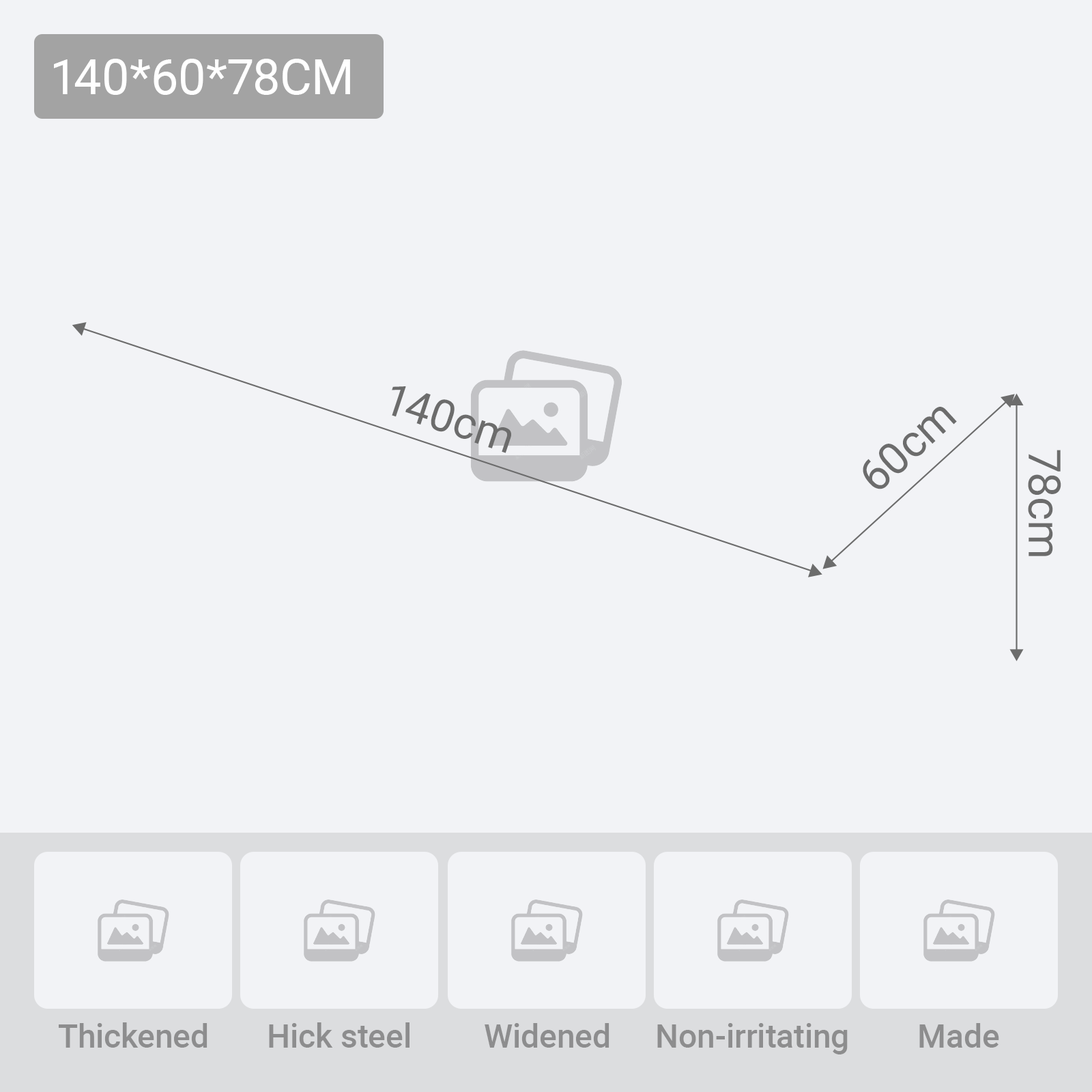
<style>
.page{position:relative;width:1092px;height:1092px;background:#f2f3f6}
.page>*{position:absolute;margin:0}
.t1{font:49.1px "Roboto-Regular";color:#ffffff}
.t2{font:44.5px "Roboto-Regular";color:#6c6c6c}
.t3{font:32.8px "Roboto-Medium";color:#8d8d8e}
</style>
<div class="page">
<p class="t1" style="left:54px;top:59px;width:296px;height:36px">140*60*78CM</p>
<p class="t2" style="left:392px;top:386px;width:119px;height:67px;rotate:18deg">140cm</p>
<p class="t2" style="left:863px;top:407px;width:94px;height:82px;rotate:-42deg">60cm</p>
<p class="t2" style="left:1028px;top:450px;width:33px;height:106px;rotate:90deg">78cm</p>
<p class="t3" style="left:59px;top:1022px;width:148px;height:26px">Thickened</p>
<p class="t3" style="left:269px;top:1022px;width:140px;height:26px">Hick steel</p>
<p class="t3" style="left:485px;top:1023px;width:124px;height:25px">Widened</p>
<p class="t3" style="left:657px;top:1023px;width:191px;height:31px">Non-irritating</p>
<p class="t3" style="left:919px;top:1023px;width:80px;height:25px">Made</p>
</div>
